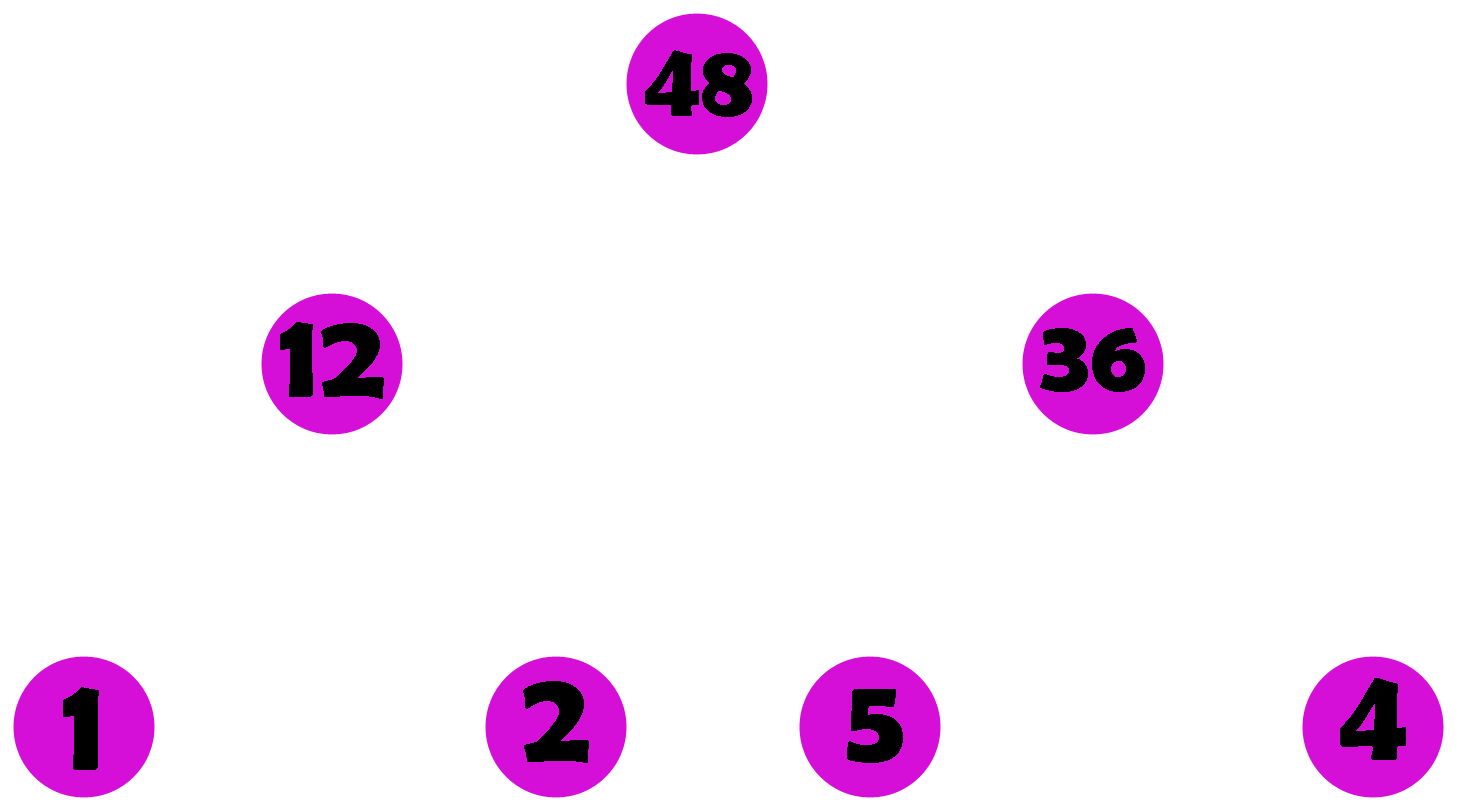
<style>
.page{position:relative;width:1459px;height:812px;background:#ffffff}
.page>*{position:absolute;margin:0}
.t1{font:106px "BerlinSansFBDemi-Bold";color:#000000}
.t2{font:125.4px "BerlinSansFBDemi-Bold";color:#000000}
.t3{font:104.5px "BerlinSansFBDemi-Bold";color:#000000}
.t4{font:129.9px "BerlinSansFBDemi-Bold";color:#000000}
.t5{font:134.7px "BerlinSansFBDemi-Bold";color:#000000}
.t6{font:132px "BerlinSansFBDemi-Bold";color:#000000}
.t7{font:121.3px "BerlinSansFBDemi-Bold";color:#000000}
</style>
<div class="page">
<p class="t1" style="left:645px;top:50px;width:107px;height:67px">48</p>
<p class="t2" style="left:280px;top:322px;width:104px;height:77px">12</p>
<p class="t3" style="left:1040px;top:328px;width:105px;height:64px">36</p>
<p class="t4" style="left:1340px;top:678px;width:66px;height:82px">4</p>
<p class="t5" style="left:63px;top:687px;width:36px;height:83px">1</p>
<p class="t6" style="left:523px;top:681px;width:66px;height:82px">2</p>
<p class="t7" style="left:847px;top:689px;width:56px;height:74px">5</p>
</div>
